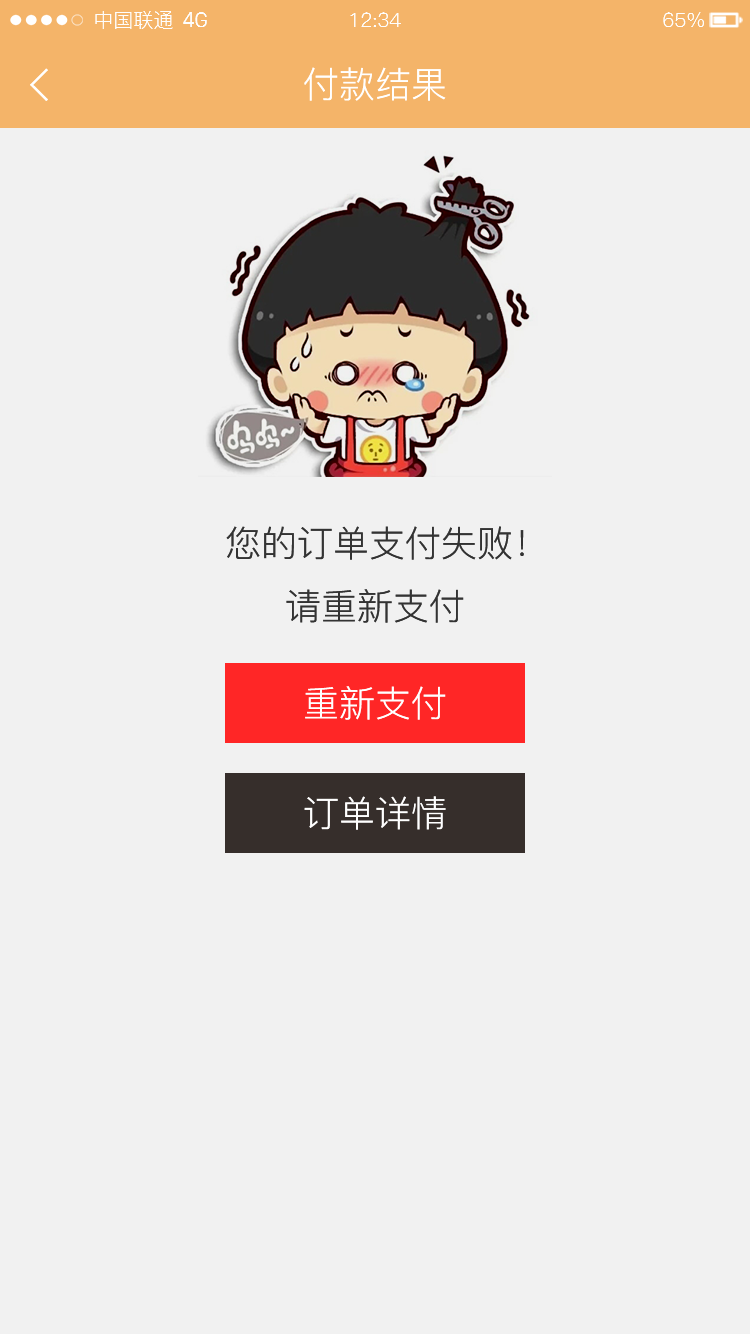
<style>
.page{position:relative;width:750px;height:1334px;background:#f1f1f1}
.page>*{position:absolute;margin:0}
.t1{font:20px "PingFang-SC-Regular";color:#fefefe}
.t2{font:20px "SanFranciscoDisplay";color:#fefefe}
.t3{font:36px "PingFang-SC-Regular";color:#ffffff}
.t4{font:36px "PingFang-SC-Regular";color:#333333}
</style>
<div class="page">
<p class="t1" style="left:95px;top:11px;width:78px;height:18px">中国联通</p>
<p class="t2" style="left:183px;top:12px;width:24px;height:15px">4G</p>
<p class="t1" style="left:350px;top:12px;width:51px;height:15px">12:34</p>
<p class="t1" style="left:663px;top:12px;width:41px;height:15px">65%</p>
<p class="t3" style="left:304px;top:67px;width:142px;height:34px">付款结果</p>
<p class="t4" style="left:226px;top:526px;width:298px;height:34px">您的订单支付失败！</p>
<p class="t4" style="left:286px;top:589px;width:178px;height:34px">请重新支付</p>
<p class="t3" style="left:305px;top:686px;width:141px;height:34px">重新支付</p>
<p class="t3" style="left:304px;top:796px;width:142px;height:34px">订单详情</p>
</div>
